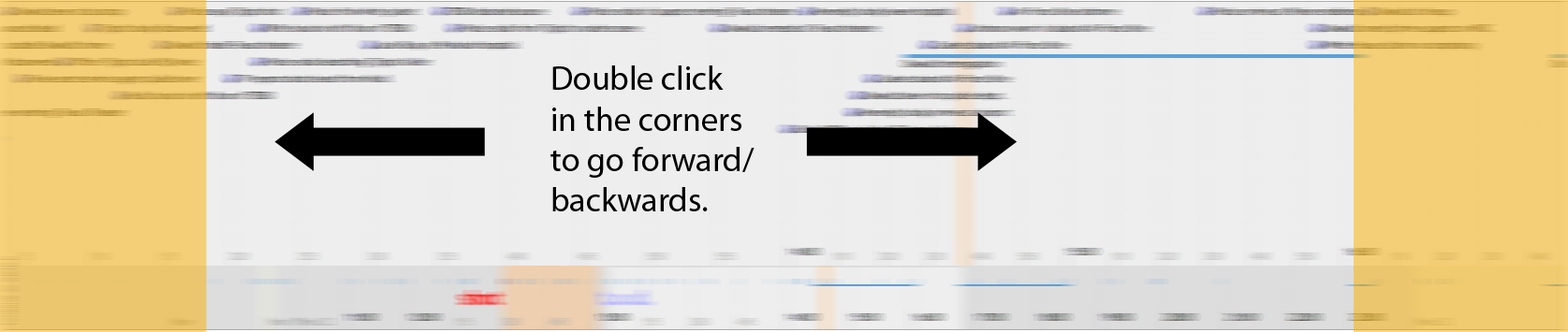
<style>
.page{position:relative;width:1568px;height:332px;background:#eeeeee}
.page>*{position:absolute;margin:0}
.t1{font:33.7px "MyriadPro-Regular";color:#000000}
</style>
<div class="page">
<p class="t1" style="left:550px;top:66px;width:205px;height:146px">Double click<br>in the corners<br>to go forward/<br>backwards.</p>
</div>
